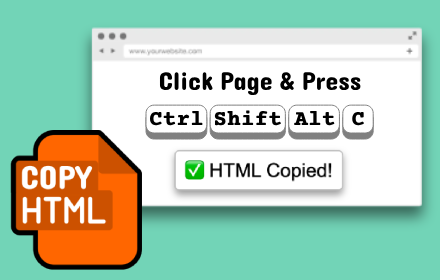
<style>
.page{position:relative;width:440px;height:280px;background:#72d4b7}
.page>*{position:absolute;margin:0}
.t1{font:25.9px "Dangrek-Regular";color:#000000}
.t2{font:22px "CourierPrime-Bold";color:#000000;font-weight:bold}
</style>
<div class="page">
<p class="t1" style="left:159px;top:72px;width:202px;height:24px">Click Page &amp; Press</p>
<p class="t2" style="left:150px;top:111px;width:53px;height:15px">Ctrl</p>
<p class="t2" style="left:214px;top:110px;width:67px;height:16px">Shift</p>
<p class="t2" style="left:294px;top:111px;width:41px;height:15px">Alt</p>
<p class="t2" style="left:352px;top:112px;width:12px;height:14px">C</p>
</div>
